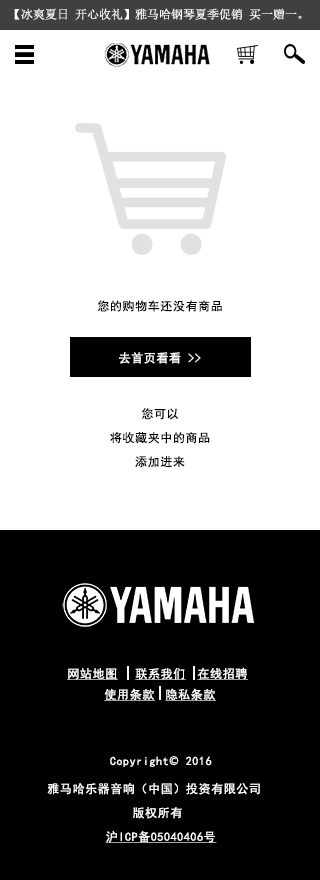
<style>
.page{position:relative;width:320px;height:880px;background:#ffffff}
.page>*{position:absolute;margin:0}
.t1{font:12px "SimSun";color:#ffffff}
.t2{font:12px "SimHei";letter-spacing:0.05em;color:#000000}
.t3{font:12px "SimHei";letter-spacing:0.05em;color:#ffffff}
.t4{font:12px/24px "SimHei";letter-spacing:0.05em;color:#000000}
.t5{font:12px "SimHei";letter-spacing:0.05em;color:#ffffff;text-decoration:underline}
.t6{font:12px/24px "SimHei";letter-spacing:0.05em;color:#ffffff}
.t7{font:12px/14px "SimHei";letter-spacing:0.05em;color:#ffffff}
.t8{font:12px/14px "AdobeHeitiStd-Regular";letter-spacing:0.05em;color:#ffffff}
.t9{font:12px/24px "SimHei";letter-spacing:0.05em;color:#ffffff;text-decoration:underline}
</style>
<div class="page">
<p class="t1" style="left:14px;top:8px;width:288px;height:12px">【冰爽夏日 开心收礼】雅马哈钢琴夏季促销 买一赠一。</p>
<p class="t2" style="left:97px;top:300px;width:125px;height:12px">您的购物车还没有商品</p>
<p class="t3" style="left:119px;top:352px;width:82px;height:12px">去首页看看 &gt;&gt;</p>
<p class="t4" style="left:110px;top:408px;width:100px;height:60px;text-align:center">您可以<br>将收藏夹中的商品<br>添加进来</p>
<p class="t5" style="left:67px;top:668px;width:51px;height:12px">网站地图</p>
<p class="t5" style="left:135px;top:668px;width:51px;height:12px">联系我们</p>
<p class="t5" style="left:197px;top:667px;width:51px;height:13px">在线招聘</p>
<p class="t5" style="left:104px;top:688px;width:51px;height:13px">使用条款</p>
<p class="t5" style="left:165px;top:688px;width:51px;height:13px">隐私条款</p>
<p class="t6" style="left:47px;top:756px;width:213px;height:87px;text-align:center"><span class="t7">Copyright</span><span class="t8">©</span><span class="t7"> 2016<br> <br></span>雅马哈乐器音响（中国）投资有限公司  <br>版权所有 <br><span class="t9">沪ICP备05040406号</span></p>
</div>
